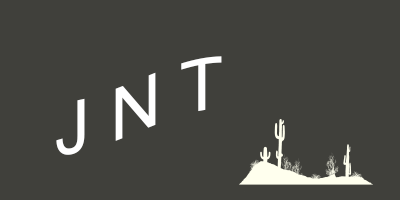
<style>
.page{position:relative;width:400px;height:200px;background:#40403b}
.page>*{position:absolute;margin:0}
.t1{font:72px "ArialNova";color:#ffffff}
</style>
<div class="page">
<p class="t1" style="left:56px;top:56px;width:166px;height:99px">J N T</p>
</div>
